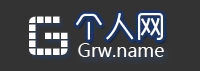
<style>
.page{position:relative;width:200px;height:71px;background:#333333}
.page>*{position:absolute;margin:0}
.t1{font:68px "3t";letter-spacing:0.025em;color:#ffffff}
.t2{font:30px "RTWSYueGoTrial-Regular";letter-spacing:0.025em;color:#ffffff}
.t3{font:18px "MicrosoftYaHei";color:#ffffff}
</style>
<div class="page">
<p class="t1" style="left:29px;top:16px;width:39px;height:39px">G</p>
<p class="t2" style="left:76px;top:13px;width:87px;height:27px">个人网</p>
<p class="t3" style="left:78px;top:43px;width:86px;height:14px">Grw.name</p>
</div>
